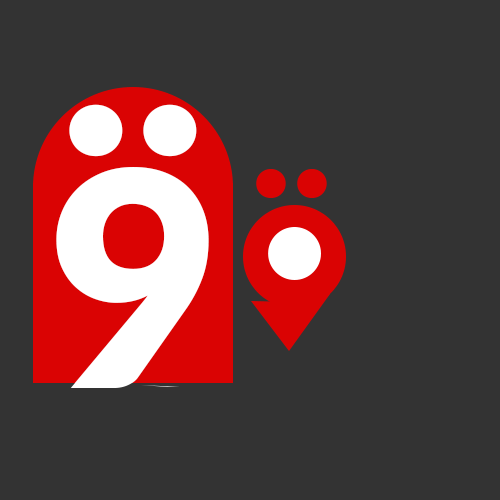
<style>
.page{position:relative;width:500px;height:500px;background:#333333}
.page>*{position:absolute;margin:0}
.t1{font:300px "Lato-Black";letter-spacing:0.01em;color:#ffffff}
.t2{font:166.7px "Lato-Black";letter-spacing:0.01em;color:#da0303}
</style>
<div class="page">
<p class="t1" style="left:69px;top:104px;width:128px;height:53px">..</p>
<p class="t1" style="left:56px;top:167px;width:153px;height:221px">9</p>
<p class="t2" style="left:256px;top:169px;width:71px;height:29px">..</p>
</div>
